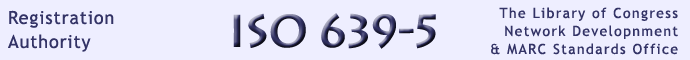
<style>
.page{position:relative;width:690px;height:60px;background:#eeeeff}
.page>*{position:absolute;margin:0}
.t1{font:18px/24px "TrebuchetMS";letter-spacing:0.05em;color:#333366}
.t2{font:48px "LeeToscanini5RegularSH";letter-spacing:-0.01em}
.t3{font:14px/18px "TrebuchetMS";letter-spacing:0.1em;color:#333366}
</style>
<div class="page">
<p class="t1" style="left:8px;top:10px;width:106px;height:42px">Registration<br>Authority</p>
<p class="t2" style="left:233px;top:13px;width:203px;height:36px">ISO 639-5</p>
<p class="t3" style="left:491px;top:7px;width:187px;height:48px;text-align:right">The Library of Congress<br>Network Developnment<br>&amp; MARC Standards Office</p>
</div>
